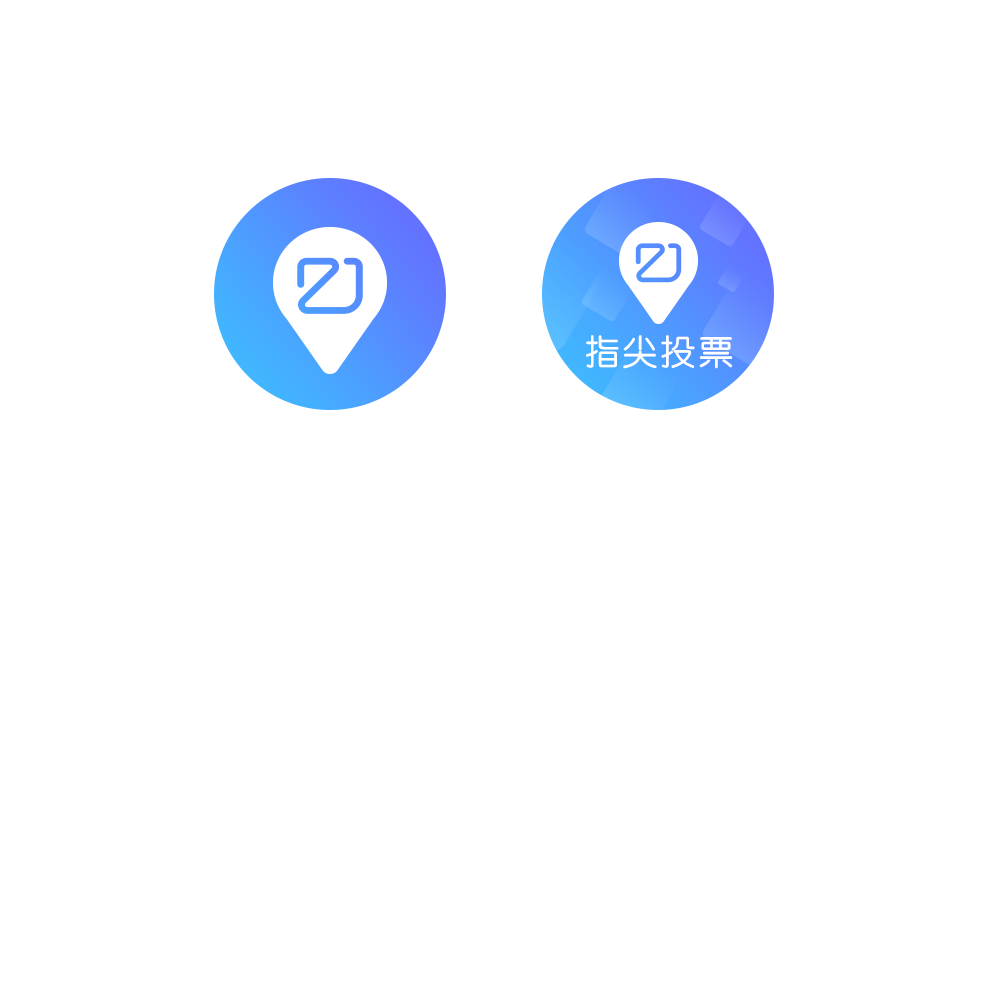
<style>
.page{position:relative;width:1000px;height:1000px;background:#ffffff}
.page>*{position:absolute;margin:0}
.t1{font:34.5px "STYuanti-TC-Regular";letter-spacing:0.1em;color:#ffffff}
</style>
<div class="page">
<p class="t1" style="left:586px;top:335px;width:147px;height:34px">指尖投票</p>
</div>
